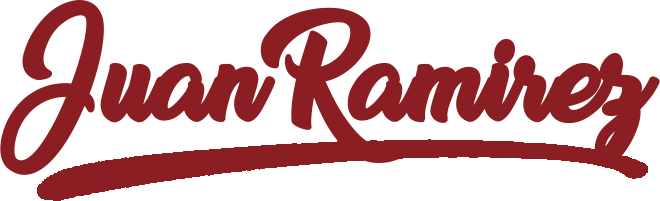
<style>
.page{position:relative;width:660px;height:201px;background:#ffffff}
.page>*{position:absolute;margin:0}
.t1{font:150px "SweetSensationsPersonalUse";color:#8b1e23;font-weight:bold}
</style>
<div class="page">
<p class="t1" style="left:0px;top:0px;width:660px;height:175px">JuanRamirez</p>
</div>
